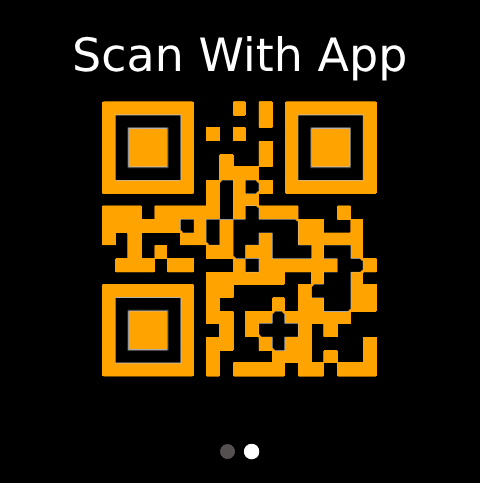
<style>
.page{position:relative;width:480px;height:483px;background:#000000}
.page>*{position:absolute;margin:0}
.t1{font:46px "DejaVuSans";color:#ffffff}
</style>
<div class="page">
<p class="t1" style="left:75px;top:36px;width:330px;height:45px">Scan With App</p>
</div>
